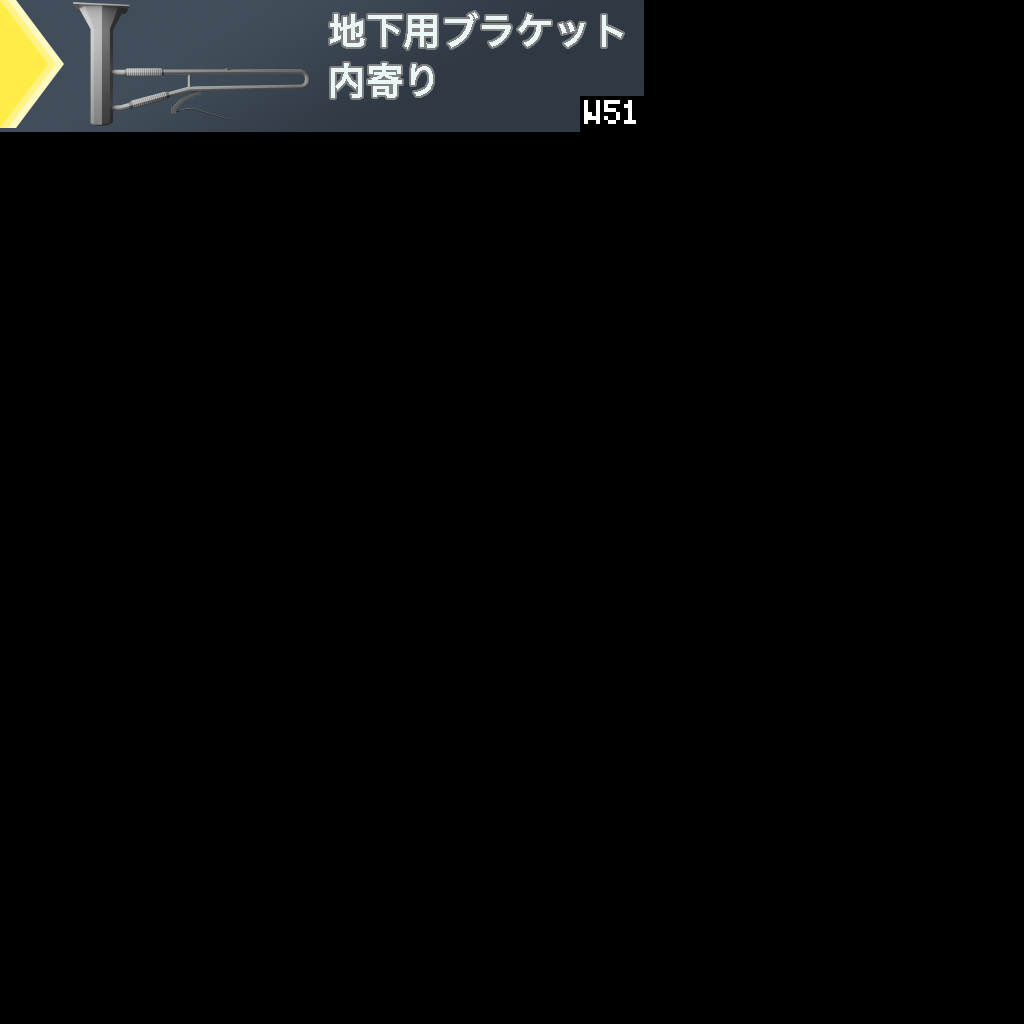
<style>
.page{position:relative;width:1024px;height:1024px;background:#000000}
.page>*{position:absolute;margin:0}
.t1{font:37.5px/50px "HiraKakuProN-W6";color:#ebf6f7}
</style>
<div class="page">
<p class="t1" style="left:330px;top:12px;width:293px;height:86px">地下用ブラケット<br>内寄り</p>
</div>
